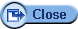
<style>
.page{position:relative;width:78px;height:29px;background:#ffffff}
.page>*{position:absolute;margin:0}
.t1{font:12px "Gulim";letter-spacing:0.05em;color:#1d2f6a}
</style>
<div class="page">
<p class="t1" style="left:33px;top:9px;width:32px;height:10px">Close</p>
<p class="t1" style="left:34px;top:9px;width:32px;height:10px">Close</p>
</div>
